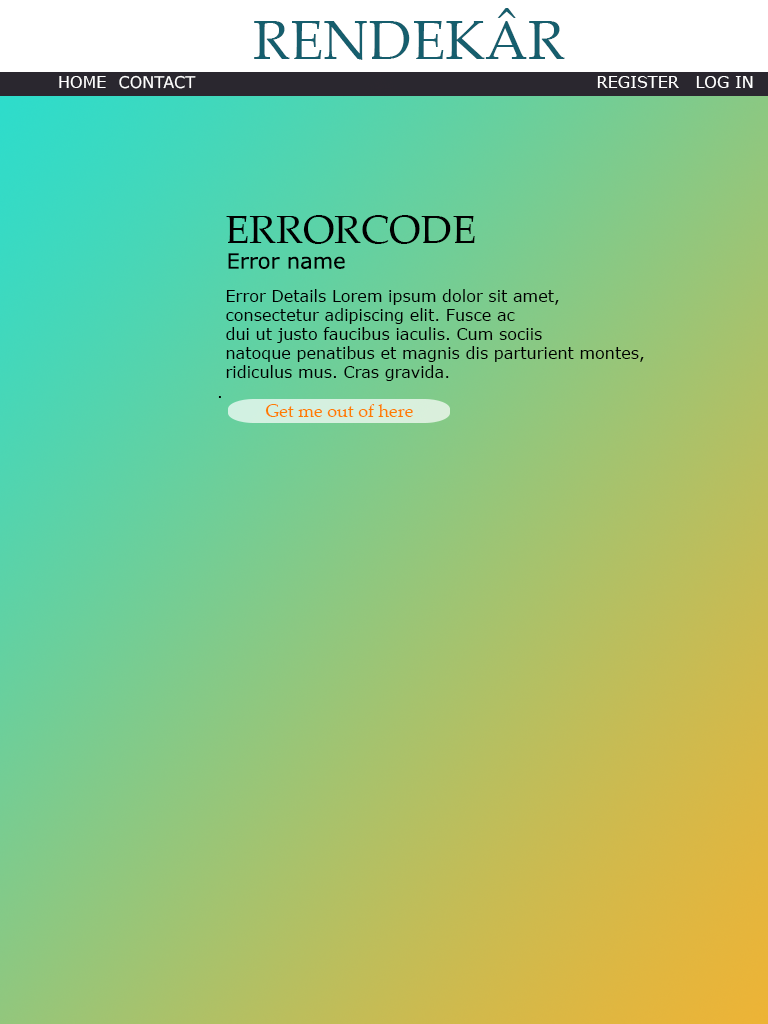
<style>
.page{position:relative;width:768px;height:1024px}
.page>*{position:absolute;margin:0}
.t1{font:55px "PalatinoLinotype-Roman";color:#165e6d}
.t2{font:16px "Verdana";color:#ffffff}
.t3{font:40px "PalatinoLinotype-Roman";color:#000000}
.t4{font:21px "Verdana";color:#000000}
.t5{font:16px "Verdana";color:#000000}
.t6{font:18px "PalatinoLinotype-Roman";color:#fe7d00}
</style>
<div class="page">
<p class="t1" style="left:254px;top:8px;width:311px;height:52px">RENDEKÂR</p>
<p class="t2" style="left:59px;top:76px;width:47px;height:12px">HOME</p>
<p class="t2" style="left:119px;top:75px;width:77px;height:14px">CONTACT</p>
<p class="t2" style="left:597px;top:76px;width:82px;height:12px">REGISTER</p>
<p class="t2" style="left:696px;top:76px;width:57px;height:12px">LOG IN</p>
<p class="t3" style="left:226px;top:215px;width:249px;height:29px">ERRORCODE</p>
<p class="t4" style="left:228px;top:253px;width:117px;height:16px">Error name</p>
<p class="t5" style="left:218px;top:289px;width:426px;height:109px;text-align:right">Error Details Lorem ipsum dolor sit amet, <br>consectetur adipiscing elit. Fusce ac <br>dui ut justo faucibus iaculis. Cum sociis <br>natoque penatibus et magnis dis parturient montes, <br>ridiculus mus. Cras gravida.<br>.</p>
<p class="t6" style="left:265px;top:404px;width:148px;height:13px">Get me out of here</p>
</div>
